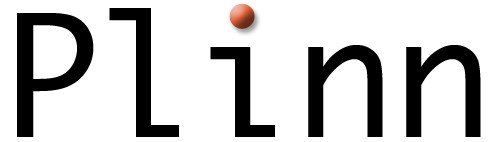
<style>
.page{position:relative;width:500px;height:142px;background:#ffffff}
.page>*{position:absolute;margin:0}
.t1{font:163px "Monaco";color:#000000}
</style>
<div class="page">
<p class="t1" style="left:17px;top:6px;width:464px;height:131px">Plinn</p>
</div>
